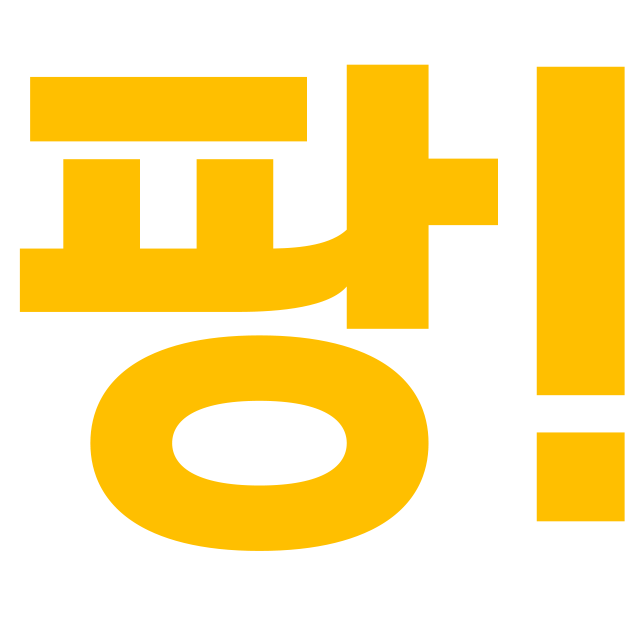
<style>
.page{position:relative;width:640px;height:640px;background:#ffffff}
.page>*{position:absolute;margin:0}
.t1{font:510.7px "LeferiPoint-Black";color:#ffbf00}
</style>
<div class="page">
<p class="t1" style="left:19px;top:64px;width:606px;height:487px">팡!</p>
</div>
